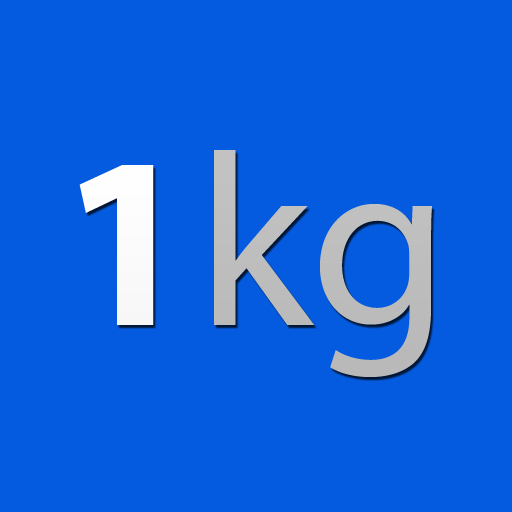
<style>
.page{position:relative;width:512px;height:512px;background:#045bdf}
.page>*{position:absolute;margin:0}
.t1{font:246.3px "MyriadPro-Regular";color:#c0c0c0}
.t2{font:246.3px "MyriadPro-Bold";color:#ffffff}
</style>
<div class="page">
<p class="t1" style="left:79px;top:150px;width:353px;height:227px"><span class="t2">1</span>kg</p>
</div>
